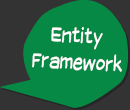
<style>
.page{position:relative;width:130px;height:110px;background:#068944}
.page>*{position:absolute;margin:0}
.t1{font:22px "SuplexmentaryComicNC";color:#ffffff;scale:0.8 1}
</style>
<div class="page">
<p class="t1" style="left:32px;top:26px;width:90px;height:46px;text-align:center;rotate:3deg">Entity<br> Framework</p>
</div>
